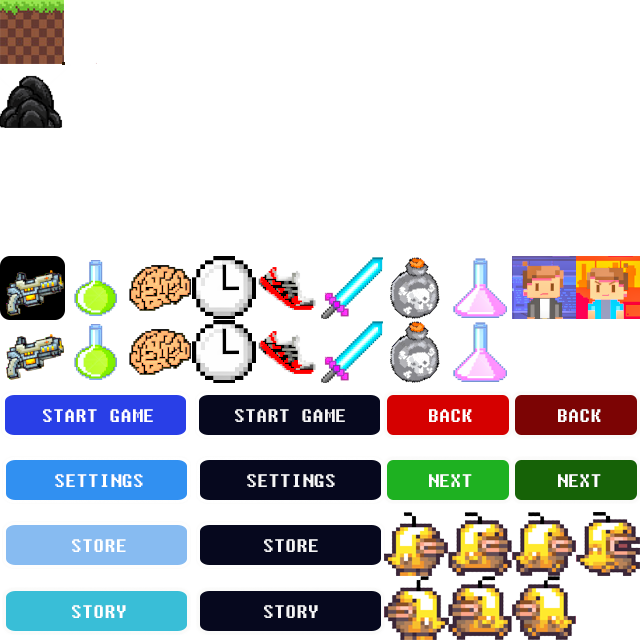
<style>
.page{position:relative;width:640px;height:640px;background:#ffffff}
.page>*{position:absolute;margin:0}
.t1{font:18px "Fixedsys";color:#ffffff}
.t2{font:18px "Fixedsys";color:#f5f5f8}
</style>
<div class="page">
<p class="t1" style="left:43px;top:409px;width:110px;height:13px">START GAME</p>
<p class="t1" style="left:43px;top:409px;width:110px;height:13px">START GAME</p>
<p class="t1" style="left:43px;top:409px;width:110px;height:13px">START GAME</p>
<p class="t1" style="left:43px;top:409px;width:110px;height:13px">START GAME</p>
<p class="t2" style="left:235px;top:409px;width:110px;height:13px">START GAME</p>
<p class="t2" style="left:235px;top:409px;width:110px;height:13px">START GAME</p>
<p class="t2" style="left:235px;top:409px;width:110px;height:13px">START GAME</p>
<p class="t2" style="left:235px;top:409px;width:110px;height:13px">START GAME</p>
<p class="t1" style="left:429px;top:409px;width:43px;height:13px">BACK</p>
<p class="t1" style="left:558px;top:409px;width:43px;height:13px">BACK</p>
<p class="t1" style="left:55px;top:474px;width:88px;height:13px">SETTINGS</p>
<p class="t1" style="left:55px;top:474px;width:88px;height:13px">SETTINGS</p>
<p class="t1" style="left:55px;top:474px;width:88px;height:13px">SETTINGS</p>
<p class="t2" style="left:247px;top:474px;width:88px;height:13px">SETTINGS</p>
<p class="t2" style="left:247px;top:474px;width:88px;height:13px">SETTINGS</p>
<p class="t2" style="left:247px;top:474px;width:88px;height:13px">SETTINGS</p>
<p class="t1" style="left:429px;top:474px;width:43px;height:13px">NEXT</p>
<p class="t1" style="left:558px;top:474px;width:43px;height:13px">NEXT</p>
<p class="t1" style="left:72px;top:539px;width:54px;height:13px">STORE</p>
<p class="t1" style="left:72px;top:539px;width:54px;height:13px">STORE</p>
<p class="t2" style="left:264px;top:539px;width:54px;height:13px">STORE</p>
<p class="t2" style="left:264px;top:539px;width:54px;height:13px">STORE</p>
<p class="t1" style="left:72px;top:605px;width:54px;height:13px">STORY</p>
<p class="t2" style="left:264px;top:605px;width:54px;height:13px">STORY</p>
</div>
